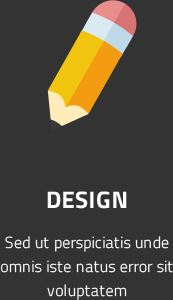
<style>
.page{position:relative;width:173px;height:300px;background:#333333}
.page>*{position:absolute;margin:0}
.t1{font:24px "TitilliumWeb-Bold";letter-spacing:0.02em;color:#ffffff;text-transform:uppercase}
.t2{font:16px/24px "TitilliumWeb-Light";letter-spacing:0.02em;color:#ffffff}
</style>
<div class="page">
<p class="t1" style="left:47px;top:191px;width:80px;height:18px">Design</p>
<p class="t2" style="left:0px;top:236px;width:173px;height:64px;text-align:center">Sed ut perspiciatis unde omnis iste natus error sit voluptatem</p>
</div>
